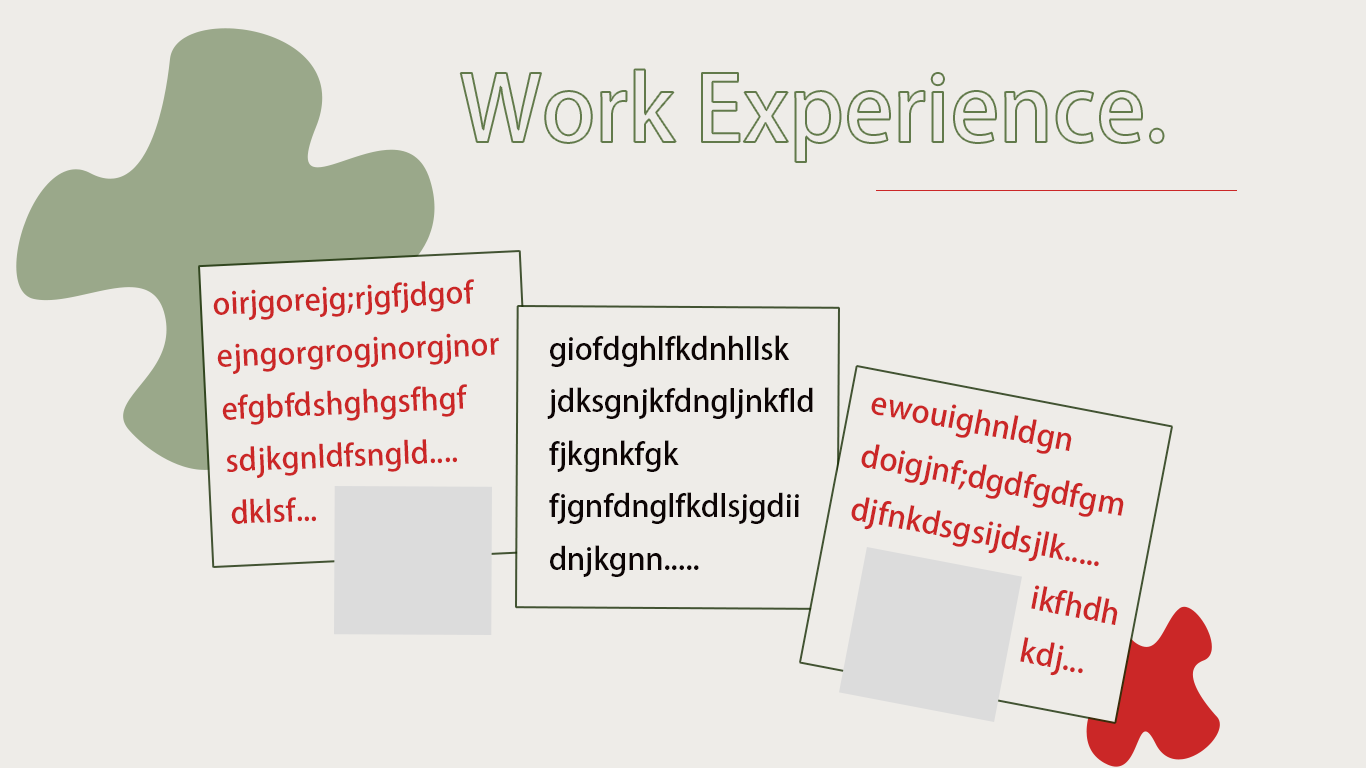
<style>
.page{position:relative;width:1366px;height:768px;background:#eeece8}
.page>*{position:absolute;margin:0}
.t1{font:30px "AdobeFanHeitiStd-Bold";color:#cb2727}
.t2{font:30px "AdobeFanHeitiStd-Bold";color:#0d0505}
.t3{font:30.8px "AdobeFanHeitiStd-Bold";color:#cb2727}
</style>
<div class="page">
<p class="t1" style="left:213px;top:279px;width:286px;height:245px;rotate:-3deg">oirjgorejg;rjgfjdgof<br>ejngorgrogjnorgjnorefgbfdshghgsfhgf<br>sdjkgnldfsngld....<br>dklsf...</p>
<p class="t2" style="left:547px;top:335px;width:266px;height:242px">giofdghlfkdnhllsk<br>jdksgnjkfdngljnkfld<br>fjkgnkfgk<br>fjgnfdnglfkdlsjgdii<br>dnjkgnn.....</p>
<p class="t3" style="left:851px;top:397px;width:273px;height:279px;rotate:11deg">ewouighnldgn<br>doigjnf;dgdfgdfgm<br>djfnkdsgsijdsjlk.....<br>                            ikfhdh<br>                            kdj...</p>
</div>
